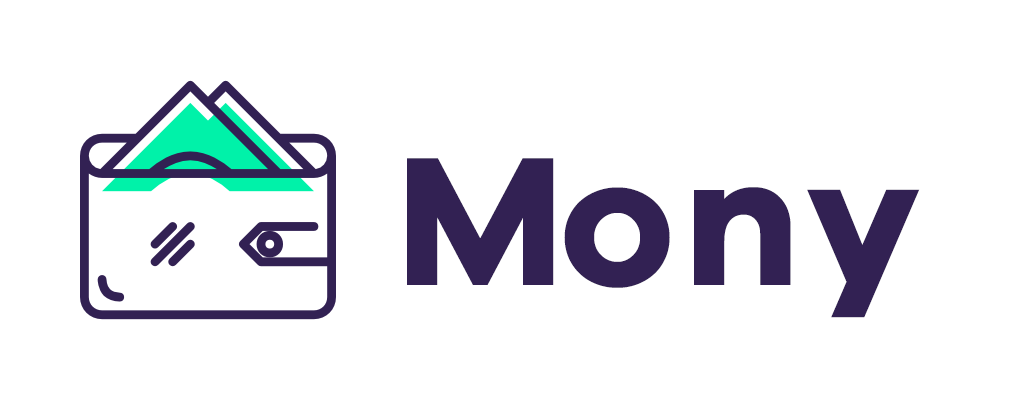
<style>
.page{position:relative;width:1009px;height:400px;background:#ffffff}
.page>*{position:absolute;margin:0}
.t1{font:189.2px "GalanoGrotesque-Bold";color:#322153}
</style>
<div class="page">
<p class="t1" style="left:407px;top:158px;width:513px;height:160px">Mony</p>
</div>
